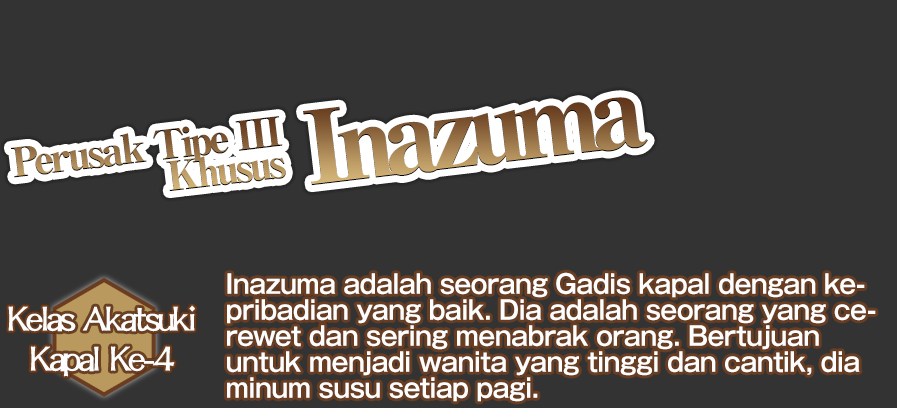
<style>
.page{position:relative;width:897px;height:408px;background:#333333}
.page>*{position:absolute;margin:0}
.t1{font:100px "RyuminPro-ExHeavy";letter-spacing:-0.1em}
.t2{font:40px/32px "RyuminPro-ExHeavy";letter-spacing:-0.08em}
.t3{font:26px/26px "GothicMB101Pro-DeBold";letter-spacing:-0.02em;color:#fdfdfd;scale:0.95 1}
.t4{font:40px/40px "DFLungMen-W9-WINP-BF";letter-spacing:-0.09em;color:#fdfdfd}
</style>
<div class="page">
<p class="t1" style="left:303px;top:97px;width:345px;height:89px;rotate:-7deg">Inazuma</p>
<p class="t2" style="left:10px;top:116px;width:276px;height:76px;text-align:right;rotate:-7deg">Perusak Tipe III<br>Khusus</p>
<p class="t3" style="left:227px;top:272px;width:649px;height:130px">Inazuma adalah seorang Gadis kapal dengan ke-<br>pribadian yang baik. Dia adalah seorang yang ce-<br>rewet dan sering menabrak orang. Bertujuan <br>untuk menjadi wanita yang tinggi dan cantik, dia<br>minum susu setiap pagi.</p>
<p class="t4" style="left:8px;top:305px;width:187px;height:72px;text-align:center">Kelas Akatsuki<br>Kapal Ke-4</p>
</div>
